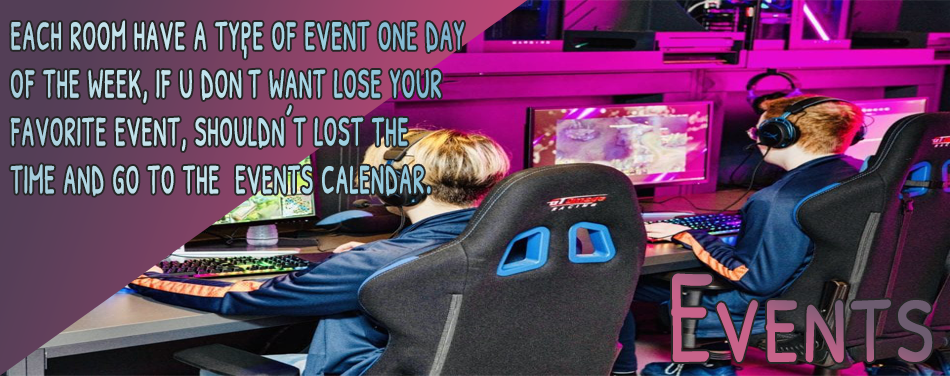
<style>
.page{position:relative;width:950px;height:376px}
.page>*{position:absolute;margin:0}
.t1{font:59.9px/47.9px "PatrickHandSC-Regular";color:#b0d8e4;scale:0.53 1}
.t2{font:133.6px "PatrickHandSC-Regular";scale:0.79 1}
</style>
<div class="page">
<p class="t1" style="left:10px;top:20px;width:454px;height:176px">each room have a type of event one day <br>of the week, if u don't want lose your <br>favorite event, shouldn´t lost the<br>time and go to the  events calendar.</p>
<p class="t2" style="left:671px;top:273px;width:262px;height:90px">Events</p>
</div>
